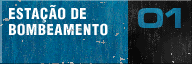
<style>
.page{position:relative;width:192px;height:64px}
.page>*{position:absolute;margin:0}
.t1{font:14.8px/15.8px "HelveticaLT-Condensed-Black";letter-spacing:0.04em;color:#ffffff}
</style>
<div class="page">
<p class="t1" style="left:9px;top:5px;width:99px;height:31px">ESTAÇÃO DE<br>BOMBEAMENTO</p>
</div>
